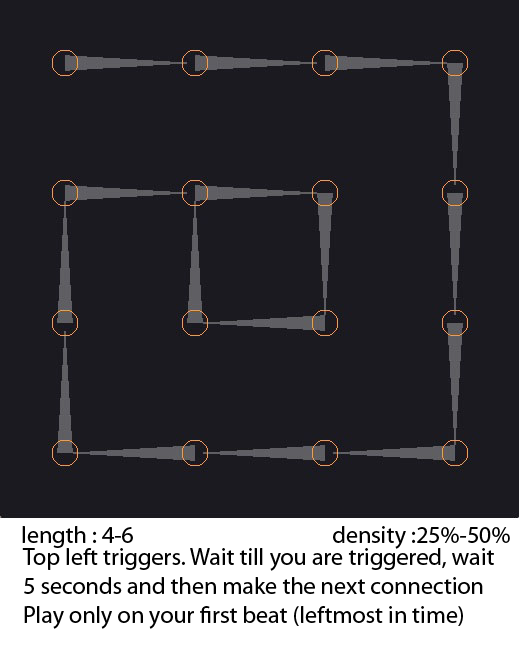
<style>
.page{position:relative;width:519px;height:648px;background:#1b1a20}
.page>*{position:absolute;margin:0}
.t1{font:24px "MyriadPro-Regular";color:#000000}
</style>
<div class="page">
<p class="t1" style="left:22px;top:526px;width:488px;height:23px">length : 4-6                                       density :25%-50%</p>
<p class="t1" style="left:22px;top:548px;width:472px;height:81px">Top left triggers. Wait till you are triggered, wait<br>5 seconds and then make the next connection<br>Play only on your first beat (leftmost in time)</p>
</div>
